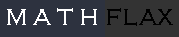
<style>
.page{position:relative;width:179px;height:37px;background:#2d323f}
.page>*{position:absolute;margin:0}
.t1{font:24px "CopperplateGothic-Light";color:#ffffff}
.t2{font:24px "CopperplateGothic-Light";color:#000000}
</style>
<div class="page">
<p class="t1" style="left:7px;top:8px;width:90px;height:17px">M A T H</p>
<p class="t2" style="left:107px;top:8px;width:66px;height:18px">FLAX</p>
</div>
